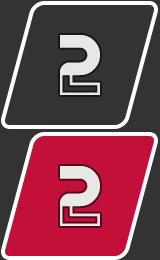
<style>
.page{position:relative;width:160px;height:260px;background:#333333}
.page>*{position:absolute;margin:0}
.t1{font:100px "Eviolite";color:#e9eae5}
</style>
<div class="page">
<p class="t1" style="left:60px;top:35px;width:40px;height:60px">2</p>
<p class="t1" style="left:60px;top:166px;width:40px;height:60px">2</p>
</div>
